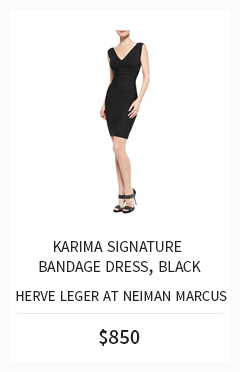
<style>
.page{position:relative;width:240px;height:372px;background:#ffffff}
.page>*{position:absolute;margin:0}
.t1{font:22.2px/20.8px "SourceSansPro-Regular";color:#232323;font-variant:small-caps}
.t2{font:20.8px "SourceSansPro-Regular";color:#232323;font-variant:small-caps}
.t3{font:20.6px "SourceSansPro-Semibold";color:#232323}
</style>
<div class="page">
<p class="t1" style="left:39px;top:241px;width:162px;height:35px;text-align:center">karima signature <br>bandage dress, black</p>
<p class="t2" style="left:16px;top:291px;width:211px;height:10px">herve leger at neiman marcus</p>
<p class="t3" style="left:99px;top:329px;width:41px;height:17px">$850</p>
</div>
